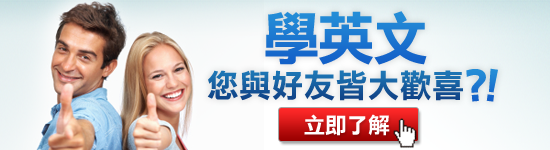
<style>
.page{position:relative;width:550px;height:150px}
.page>*{position:absolute;margin:0}
.t1{font:57.6px "DFLiHeiStd-W7";letter-spacing:-0.05em;color:#1c77d0}
.t2{font:32.2px "DFLiHeiStd-W7";color:#1760a1}
.t3{font:47.4px "DFLiHeiStd-W7";color:#2081d3}
.t4{font:47.4px "DFLiHeiStd-W7";color:#1e7cd1}
.t5{font:22.3px "DFLiHeiStd-W7";letter-spacing:-0.05em;color:#fffefe}
</style>
<div class="page">
<p class="t1" style="left:265px;top:11px;width:162px;height:54px">學英文</p>
<p class="t2" style="left:207px;top:70px;width:256px;height:31px">您與好友皆大歡喜</p>
<p class="t3" style="left:466px;top:69px;width:20px;height:33px;rotate:-4deg">?</p>
<p class="t4" style="left:486px;top:68px;width:12px;height:34px;rotate:8deg">!</p>
<p class="t5" style="left:304px;top:114px;width:86px;height:22px">立即了解</p>
</div>
